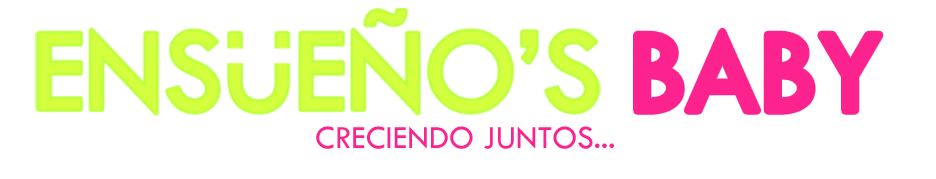
<style>
.page{position:relative;width:936px;height:179px;background:#ffffff}
.page>*{position:absolute;margin:0}
.t1{font:121.7px "TwCenMT-Regular";color:#fc238e}
.t2{font:33.4px "TwCenMT-Regular";color:#fc238e}
</style>
<div class="page">
<p class="t1" style="left:637px;top:31px;width:243px;height:80px">BABY</p>
<p class="t2" style="left:316px;top:126px;width:298px;height:23px">CRECIENDO JUNTOS...</p>
</div>
